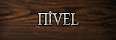
<style>
.page{position:relative;width:116px;height:40px}
.page>*{position:absolute;margin:0}
.t1{font:18.3px "Mason-Regular";letter-spacing:-0.075em;scale:0.84 1}
</style>
<div class="page">
<p class="t1" style="left:38px;top:11px;width:41px;height:15px">NIVEL</p>
</div>
